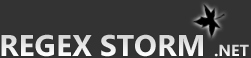
<style>
.page{position:relative;width:251px;height:58px;background:#333333}
.page>*{position:absolute;margin:0}
.t1{font:30px "Ebrima-Bold";color:#e9e9e9;text-transform:uppercase}
.t2{font:16px "Ebrima-Bold";color:#e8e8e8;text-transform:uppercase}
</style>
<div class="page">
<p class="t1" style="left:1px;top:34px;width:202px;height:23px">Regex Storm</p>
<p class="t2" style="left:214px;top:44px;width:35px;height:13px">.NET</p>
</div>
